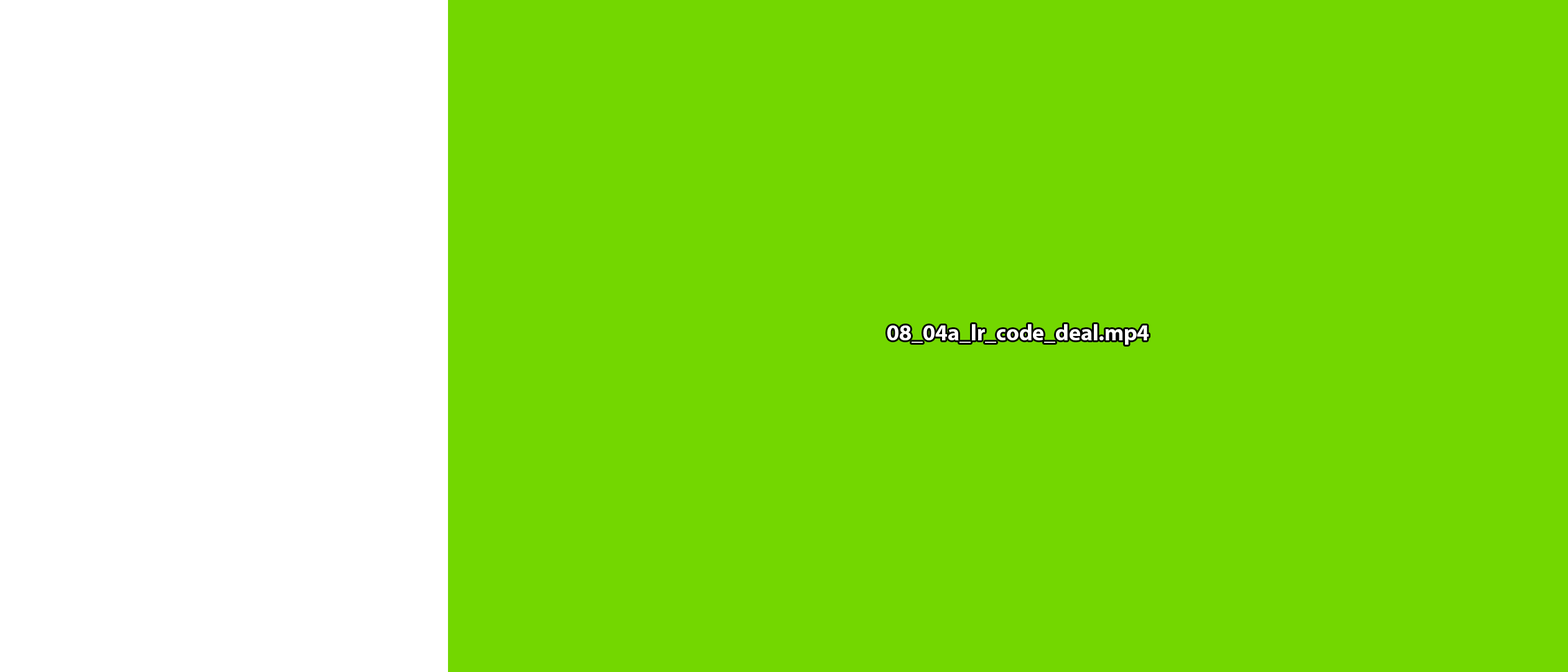
<style>
.page{position:relative;width:1568px;height:672px;background:#73d700}
.page>*{position:absolute;margin:0}
.t1{font:22.3px "MyriadPro-Bold";color:#ffffff}
</style>
<div class="page">
<p class="t1" style="left:887px;top:324px;width:262px;height:21px">08_04a_lr_code_deal.mp4</p>
</div>
